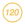
<style>
.page{position:relative;width:25px;height:25px;background:#ffffff}
.page>*{position:absolute;margin:0}
.t1{font:8px "HelveticaNeue-LightItalic";color:#edc051;font-weight:bold}
</style>
<div class="page">
<p class="t1" style="left:6px;top:9px;width:13px;height:7px">120</p>
</div>
